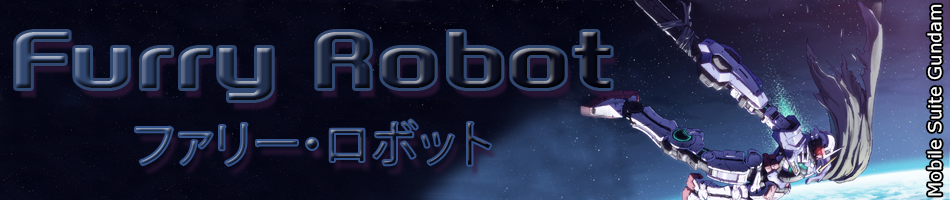
<style>
.page{position:relative;width:950px;height:200px}
.page>*{position:absolute;margin:0}
.t1{font:18px "Verdana";color:#ffffff}
.t2{font:70px "GAUfontRootNormal"}
.t3{font:48px "KozGoPr6N-Regular"}
</style>
<div class="page">
<p class="t1" style="left:927px;top:4px;width:15px;height:192px;rotate:-90deg">Mobile Suite Gundam</p>
<p class="t2" style="left:16px;top:32px;width:595px;height:68px">Furry Robot</p>
<p class="t3" style="left:136px;top:120px;width:355px;height:45px">ファリー・ロボット</p>
</div>
